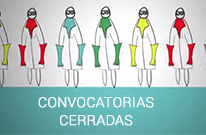
<style>
.page{position:relative;width:206px;height:135px}
.page>*{position:absolute;margin:0}
.t1{font:14px/18px "Roboto-Light";color:#ffffff;text-transform:uppercase;font-weight:bold}
</style>
<div class="page">
<p class="t1" style="left:38px;top:97px;width:116px;height:29px;text-align:center">Convocatorias<br>Cerradas</p>
</div>
